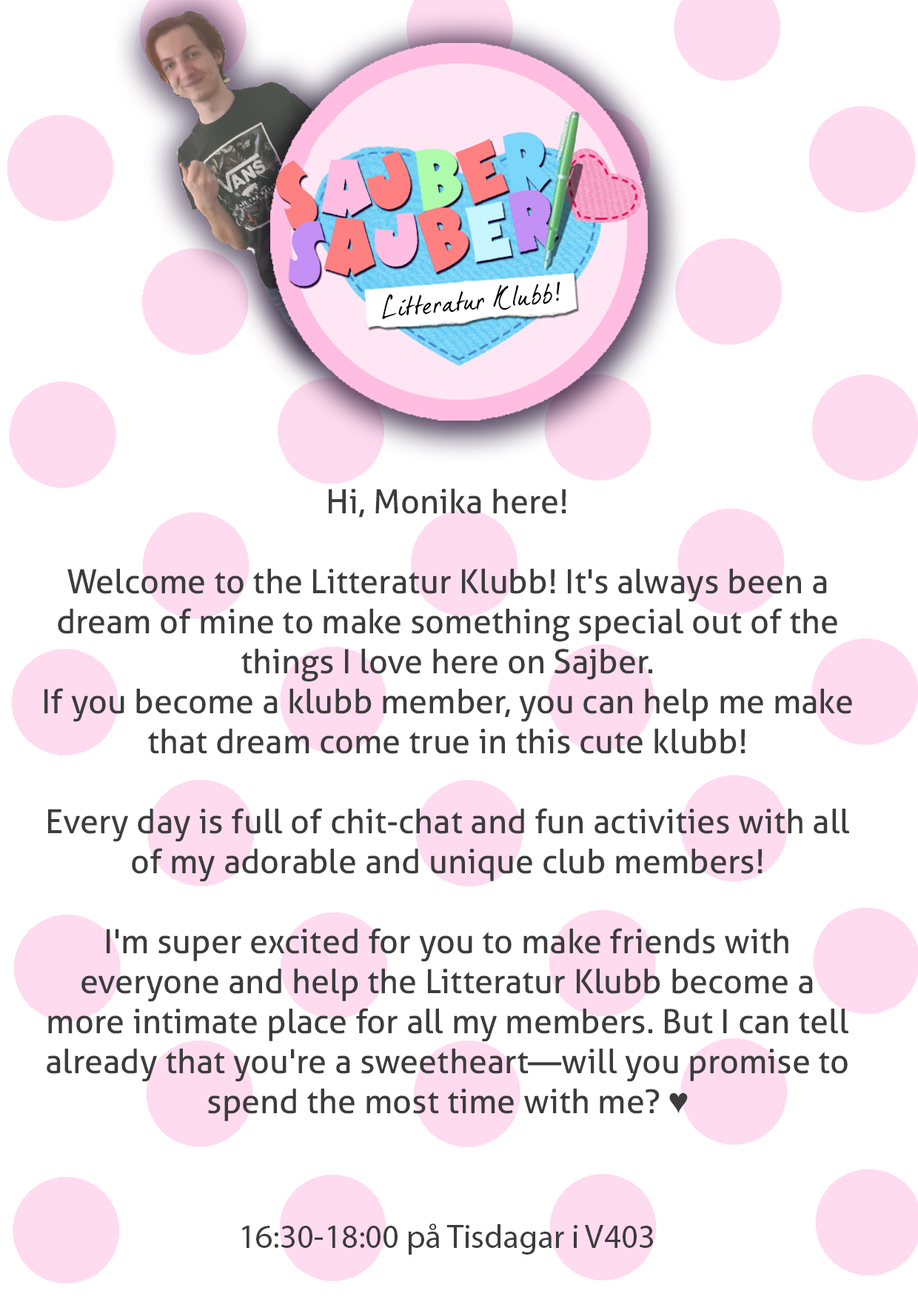
<style>
.page{position:relative;width:918px;height:1299px;background:#ffffff}
.page>*{position:absolute;margin:0}
.t1{font:26.7px "DearJoe5CASUAL";color:#000000}
.t2{font:26.7px "SegoeScript";color:#000000}
.t3{font:33.3px "Aller-Regular";color:#3c3c3c}
.t4{font:33.3px "ArialMT";color:#3c3c3c}
.t5{font:33.3px "MyriadPro-Regular";color:#3c3c3c}
</style>
<div class="page">
<p class="t1" style="left:382px;top:281px;width:179px;height:38px;rotate:-5deg">Litteratur Klubb<span class="t2">!</span></p>
<p class="t3" style="left:44px;top:488px;width:808px;height:633px;text-align:center">Hi, Monika here!<br><br>Welcome to the Litteratur Klubb! It's always been a dream of mine to make something special out of the things I love here on Sajber. <br>If you become a klubb member, you can help me make that dream come true in this cute klubb!<br><br>Every day is full of chit-chat and fun activities with all of my adorable and unique club members!<br><br>I'm super excited for you to make friends with everyone and help the Litteratur Klubb become a more intimate place for all my members. But I can tell already that you're a sweetheart—will you promise to spend the most time with me? <span class="t4">♥</span></p>
<p class="t5" style="left:242px;top:1223px;width:411px;height:31px">16:30-18:00 på Tisdagar i V403</p>
</div>
